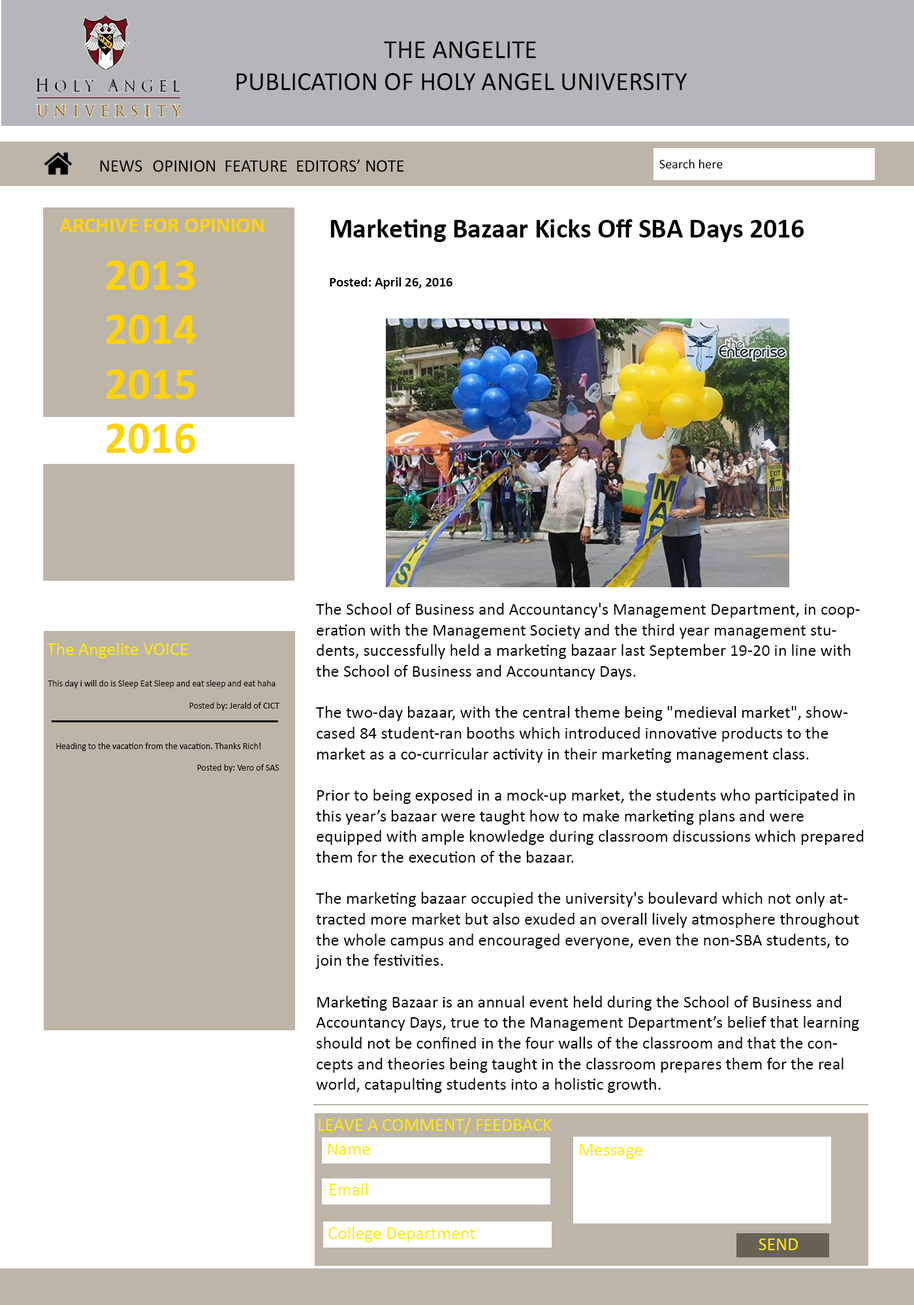
<style>
.page{position:relative;width:914px;height:1305px;background:#ffffff}
.page>*{position:absolute;margin:0}
.t1{font:26.4px "Calibri";color:#000000}
.t2{font:17.6px "Calibri";color:#000000}
.t3{font:13.2px "Calibri";color:#000000}
.t4{font:21.5px "Calibri-Bold";color:#ffd300}
.t5{font:27.2px "Calibri-Bold";color:#000000}
.t6{font:13.6px "Calibri-Bold";color:#000000}
.t7{font:45.3px "Calibri-Bold";color:#ffd300}
.t8{font:17.2px "Calibri";color:#000000}
.t9{font:18.1px "Calibri";color:#ffea01}
.t10{font:9.1px "Calibri";color:#000000}
</style>
<div class="page">
<p class="t1" style="left:236px;top:41px;width:451px;height:50px;text-align:center">THE ANGELITE<br>PUBLICATION OF HOLY ANGEL UNIVERSITY</p>
<p class="t2" style="left:100px;top:159px;width:304px;height:13px">NEWS   OPINION  FEATURE  EDITORS’ NOTE</p>
<p class="t3" style="left:659px;top:159px;width:63px;height:10px">Search here</p>
<p class="t4" style="left:59px;top:218px;width:205px;height:15px">ARCHIVE FOR OPINION</p>
<p class="t5" style="left:330px;top:219px;width:473px;height:70px">Marketing Bazaar Kicks Off SBA Days 2016<br><br><span class="t6">Posted: April 26, 2016</span></p>
<p class="t7" style="left:106px;top:260px;width:90px;height:194px">2013 <br>2014<br>2015<br>2016</p>
<p class="t8" style="left:315px;top:603px;width:548px;height:490px">The School of Business and Accountancy's Management Department, in cooperation with the Management Society and the third year management students, successfully held a marketing bazaar last September 19-20 in line with the School of Business and Accountancy Days.<br><br>The two-day bazaar, with the central theme being "medieval market", showcased 84 student-ran booths which introduced innovative products to the market as a co-curricular activity in their marketing management class.<br><br>Prior to being exposed in a mock-up market, the students who participated in this year’s bazaar were taught how to make marketing plans and were equipped with ample knowledge during classroom discussions which prepared them for the execution of the bazaar.<br><br>The marketing bazaar occupied the university's boulevard which not only attracted more market but also exuded an overall lively atmosphere throughout the whole campus and encouraged everyone, even the non-SBA students, to join the festivities.<br><br>Marketing Bazaar is an annual event held during the School of Business and Accountancy Days, true to the Management Department’s belief that learning should not be confined in the four walls of the classroom and that the concepts and theories being taught in the classroom prepares them for the real world, catapulting students into a holistic growth.</p>
<p class="t9" style="left:47px;top:643px;width:141px;height:15px">The Angelite VOICE</p>
<p class="t10" style="left:48px;top:680px;width:232px;height:31px">This day i will do is Sleep Eat Sleep and eat sleep and eat haha<br><br>      Posted by: Jerald of CICT</p>
<p class="t10" style="left:56px;top:743px;width:223px;height:30px">Heading to the vacation from the vacation. Thanks Rich! <br>      <br>      Posted by: Vero of SAS</p>
<p class="t9" style="left:318px;top:1118px;width:233px;height:16px">LEAVE A COMMENT/ FEEDBACK</p>
<p class="t9" style="left:328px;top:1143px;width:42px;height:12px">Name</p>
<p class="t9" style="left:579px;top:1144px;width:64px;height:15px">Message</p>
<p class="t9" style="left:330px;top:1183px;width:37px;height:13px">Email</p>
<p class="t9" style="left:328px;top:1227px;width:147px;height:16px">College Department</p>
<p class="t9" style="left:758px;top:1239px;width:39px;height:11px">SEND</p>
</div>
